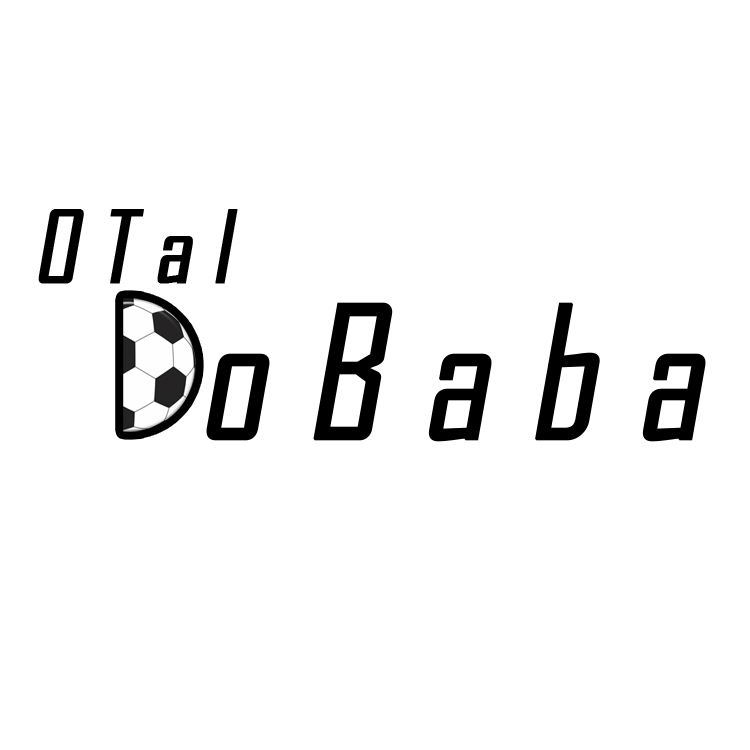
<style>
.page{position:relative;width:750px;height:750px;background:#ffffff}
.page>*{position:absolute;margin:0}
.t1{font:96px "AgencyFB-Reg";letter-spacing:0.2em;color:#000000;font-weight:bold;font-style:italic}
.t2{font:176.8px "AgencyFB-Reg";letter-spacing:0.2em;color:#000000;font-weight:bold;font-style:italic}
</style>
<div class="page">
<p class="t1" style="left:38px;top:209px;width:200px;height:75px">OTal</p>
<p class="t2" style="left:206px;top:302px;width:500px;height:140px">oBaba</p>
</div>
